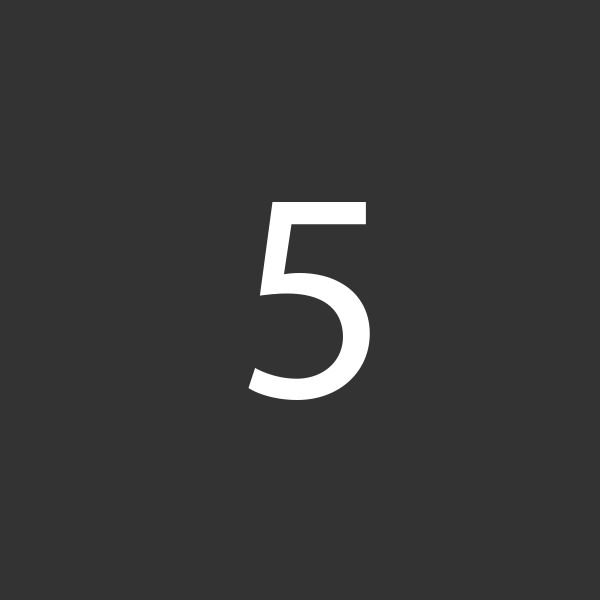
<style>
.page{position:relative;width:600px;height:600px;background:#333333}
.page>*{position:absolute;margin:0}
.t1{font:300px "MyriadPro-Regular";color:#ffffff}
</style>
<div class="page">
<p class="t1" style="left:248px;top:202px;width:122px;height:198px">5</p>
</div>
